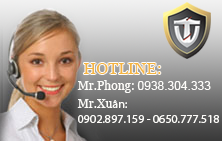
<style>
.page{position:relative;width:222px;height:141px}
.page>*{position:absolute;margin:0}
.t1{font:16px "Georgia";color:#f4b441}
.t2{font:12px "ArialMT";color:#fdfcf9}
.t3{font:12px "Georgia";color:#fdfcf9}
.t4{font:12px "MyriadPro-Regular";color:#fdfcf9}
</style>
<div class="page">
<p class="t1" style="left:83px;top:63px;width:78px;height:11px">HOTLINE:</p>
<p class="t2" style="left:77px;top:80px;width:134px;height:13px"><span class="t3">Mr.Phong: </span>0938.304.333</p>
<p class="t4" style="left:77px;top:99px;width:142px;height:24px;text-align:justify"><span class="t3">Mr.Xu</span>ân: <br>0902.897.159 - 0650.777.518</p>
</div>
